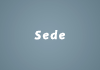
<style>
.page{position:relative;width:100px;height:70px}
.page>*{position:absolute;margin:0}
.t1{font:12.5px "Candara-BoldItalic";letter-spacing:0.11em;color:#ffffff;font-weight:bold}
.t2{font:12.5px "Candara-BoldItalic";letter-spacing:0.11em;color:#ffffff;text-transform:uppercase;font-weight:bold}
</style>
<div class="page">
<p class="t1" style="left:34px;top:30px;width:31px;height:10px"><span class="t2">S</span>ede</p>
</div>
